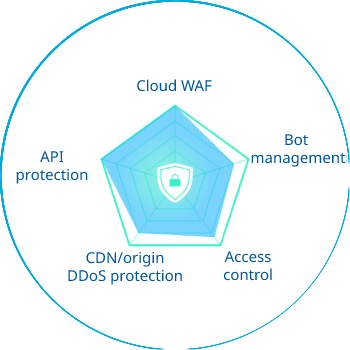
<style>
.page{position:relative;width:350px;height:350px;background:#ffffff}
.page>*{position:absolute;margin:0}
.t1{font:15px "NotoSans-Regular";color:#01579b}
</style>
<div class="page">
<p class="t1" style="left:137px;top:79px;width:75px;height:13px">Cloud WAF</p>
<p class="t1" style="left:251px;top:134px;width:95px;height:33px;text-align:center">Bot <br>management</p>
<p class="t1" style="left:16px;top:151px;width:72px;height:33px;text-align:center">API<br>protection</p>
<p class="t1" style="left:68px;top:251px;width:114px;height:34px;text-align:center">CDN/origin<br>DDoS protection</p>
<p class="t1" style="left:223px;top:251px;width:49px;height:30px;text-align:center">Access<br>control</p>
</div>
